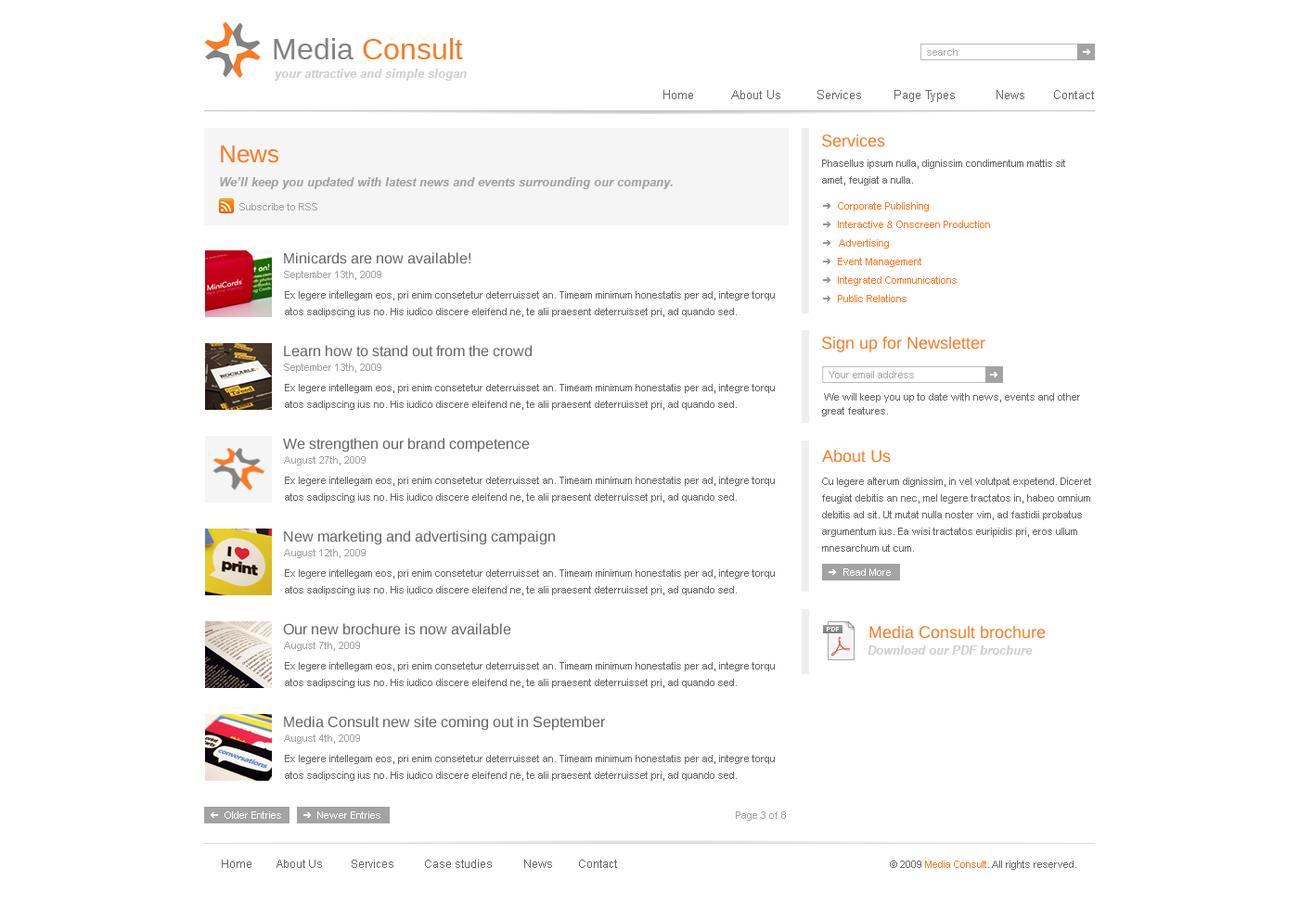
<style>
.page{position:relative;width:1299px;height:918px;background:#ffffff}
.page>*{position:absolute;margin:0}
.t1{font:29.7px "LiberationSans-Regular";color:#828282}
.t2{font:29.7px "LiberationSans-Regular";color:#f87b27}
.t3{font:10.2px "ArialMT";color:#aaaaaa}
.t4{font:12.1px "Arial-BoldItalicMT";color:#cacaca}
.t5{font:12.1px "ArialMT";color:#666666}
.t6{font:16.7px "LiberationSans-Regular";color:#f87b27}
.t7{font:24.1px "LiberationSans-Regular";color:#f87b27}
.t8{font:10.2px/16.7px "ArialMT";color:#666666}
.t9{font:12.1px "Arial-BoldItalicMT";color:#a1a1a1}
.t10{font:10.2px "ArialMT";color:#a1a1a1}
.t11{font:10.2px "ArialMT";color:#f87b27}
.t12{font:14.8px "LiberationSans-Regular";color:#666666}
.t13{font:10.2px/13.9px "ArialMT";color:#666666}
.t14{font:10.2px "ArialMT";color:#ffffff}
.t15{font:6.5px "LiberationSans-Regular";letter-spacing:0.06em;color:#ffffff}
.t16{font:6.5px "LiberationSans-Regular";color:#ffffff}
.t17{font:11.1px "ArialMT";color:#666666}
.t18{font:10.2px "ArialMT";color:#666666}
</style>
<div class="page">
<p class="t1" style="left:274px;top:38px;width:79px;height:21px">Media</p>
<p class="t2" style="left:363px;top:38px;width:100px;height:21px">Consult</p>
<p class="t3" style="left:927px;top:48px;width:30px;height:8px">search</p>
<p class="t4" style="left:275px;top:69px;width:192px;height:12px">your attractive and simple slogan</p>
<p class="t5" style="left:663px;top:90px;width:30px;height:9px">Home</p>
<p class="t5" style="left:731px;top:90px;width:49px;height:9px">About Us</p>
<p class="t5" style="left:817px;top:90px;width:44px;height:9px">Services</p>
<p class="t5" style="left:894px;top:90px;width:60px;height:12px">Page Types</p>
<p class="t5" style="left:996px;top:90px;width:28px;height:9px">News</p>
<p class="t5" style="left:1054px;top:90px;width:40px;height:9px">Contact</p>
<p class="t6" style="left:822px;top:134px;width:63px;height:13px">Services</p>
<p class="t7" style="left:221px;top:146px;width:57px;height:17px">News</p>
<p class="t8" style="left:822px;top:160px;width:243px;height:26px">Phasellus ipsum nulla, dignissim condimentum mattis sit amet, feugiat a nulla.</p>
<p class="t9" style="left:220px;top:177px;width:452px;height:12px">We’ll keep you updated with latest news and events surrounding our company.</p>
<p class="t10" style="left:239px;top:203px;width:78px;height:8px">Subscribe to RSS</p>
<p class="t11" style="left:838px;top:202px;width:90px;height:9px">Corporate Publishing</p>
<p class="t11" style="left:838px;top:221px;width:152px;height:7px">Interactive &amp; Onscreen Production</p>
<p class="t11" style="left:839px;top:239px;width:50px;height:10px">Advertising</p>
<p class="t12" style="left:284px;top:252px;width:186px;height:12px">Minicards are now available!</p>
<p class="t11" style="left:838px;top:258px;width:83px;height:9px">Event Management</p>
<p class="t10" style="left:284px;top:271px;width:97px;height:9px">September 13th, 2009</p>
<p class="t11" style="left:838px;top:276px;width:118px;height:10px">Integrated Communications</p>
<p class="t8" style="left:285px;top:291px;width:490px;height:26px">Ex legere intellegam eos, pri enim consetetur deterruisset an. Timeam minimum honestatis per ad, integre torqu atos sadipscing ius no. His iudico discere eleifend ne, te alii praesent deterruisset pri, ad quando sed.</p>
<p class="t11" style="left:838px;top:295px;width:68px;height:7px">Public Relations</p>
<p class="t6" style="left:822px;top:337px;width:163px;height:15px">Sign up for Newsletter</p>
<p class="t12" style="left:284px;top:345px;width:247px;height:12px">Learn how to stand out from the crowd</p>
<p class="t10" style="left:284px;top:364px;width:97px;height:9px">September 13th, 2009</p>
<p class="t3" style="left:828px;top:371px;width:86px;height:7px">Your email address</p>
<p class="t8" style="left:285px;top:384px;width:490px;height:26px">Ex legere intellegam eos, pri enim consetetur deterruisset an. Timeam minimum honestatis per ad, integre torqu atos sadipscing ius no. His iudico discere eleifend ne, te alii praesent deterruisset pri, ad quando sed.</p>
<p class="t13" style="left:822px;top:393px;width:258px;height:23px">We will keep you up to date with news, events and other great features.</p>
<p class="t12" style="left:283px;top:438px;width:247px;height:15px">We strengthen our brand competence</p>
<p class="t6" style="left:822px;top:450px;width:68px;height:13px">About Us</p>
<p class="t10" style="left:284px;top:456px;width:81px;height:10px">August 27th, 2009</p>
<p class="t8" style="left:285px;top:477px;width:490px;height:26px">Ex legere intellegam eos, pri enim consetetur deterruisset an. Timeam minimum honestatis per ad, integre torqu atos sadipscing ius no. His iudico discere eleifend ne, te alii praesent deterruisset pri, ad quando sed.</p>
<p class="t8" style="left:822px;top:478px;width:269px;height:74px">Cu legere alterum dignissim, in vel volutpat expetend. Diceret feugiat debitis an nec, mel legere tractatos in, habeo omnium debitis ad sit. Ut mutat nulla noster vim, ad fastidii probatus argumentum ius. Ea wisi tractatos euripidis pri, eros ullum mnesarchum ut cum.</p>
<p class="t12" style="left:284px;top:531px;width:271px;height:14px">New marketing and advertising campaign</p>
<p class="t10" style="left:284px;top:549px;width:81px;height:9px">August 12th, 2009</p>
<p class="t8" style="left:285px;top:570px;width:490px;height:25px">Ex legere intellegam eos, pri enim consetetur deterruisset an. Timeam minimum honestatis per ad, integre torqu atos sadipscing ius no. His iudico discere eleifend ne, te alii praesent deterruisset pri, ad quando sed.</p>
<p class="t14" style="left:843px;top:569px;width:47px;height:7px">Read More</p>
<p class="t12" style="left:283px;top:623px;width:228px;height:12px">Our new brochure is now available</p>
<p class="t15" style="left:826px;top:627px;width:13px;height:5px">PD<span class="t16">F</span></p>
<p class="t6" style="left:869px;top:626px;width:176px;height:13px">Media Consult brochure</p>
<p class="t10" style="left:284px;top:642px;width:76px;height:9px">August 7th, 2009</p>
<p class="t4" style="left:867px;top:646px;width:165px;height:9px">Download our PDF brochure</p>
<p class="t8" style="left:285px;top:662px;width:490px;height:26px">Ex legere intellegam eos, pri enim consetetur deterruisset an. Timeam minimum honestatis per ad, integre torqu atos sadipscing ius no. His iudico discere eleifend ne, te alii praesent deterruisset pri, ad quando sed.</p>
<p class="t12" style="left:284px;top:716px;width:321px;height:15px">Media Consult new site coming out in September</p>
<p class="t10" style="left:284px;top:735px;width:76px;height:9px">August 4th, 2009</p>
<p class="t8" style="left:285px;top:755px;width:490px;height:26px">Ex legere intellegam eos, pri enim consetetur deterruisset an. Timeam minimum honestatis per ad, integre torqu atos sadipscing ius no. His iudico discere eleifend ne, te alii praesent deterruisset pri, ad quando sed.</p>
<p class="t14" style="left:224px;top:812px;width:57px;height:7px">Older Entries</p>
<p class="t14" style="left:317px;top:812px;width:63px;height:7px">Newer Entries</p>
<p class="t10" style="left:736px;top:812px;width:50px;height:9px">Page 3 of 8</p>
<p class="t17" style="left:222px;top:860px;width:29px;height:8px">Home</p>
<p class="t17" style="left:276px;top:860px;width:46px;height:8px">About Us</p>
<p class="t17" style="left:352px;top:860px;width:41px;height:8px">Services</p>
<p class="t17" style="left:425px;top:860px;width:67px;height:8px">Case studies</p>
<p class="t17" style="left:524px;top:860px;width:28px;height:8px">News</p>
<p class="t17" style="left:579px;top:860px;width:38px;height:8px">Contact</p>
<p class="t18" style="left:890px;top:861px;width:186px;height:9px">© 2009 Media Consult. All rights reserved.</p>
<p class="t11" style="left:925px;top:861px;width:61px;height:7px">Media Consult</p>
</div>
